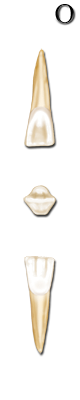
<style>
.page{position:relative;width:80px;height:400px;background:#ffffff}
.page>*{position:absolute;margin:0}
.t1{font:28.4px "TimesNewRomanPSMT";letter-spacing:0.005em;color:#000000}
</style>
<div class="page">
<p class="t1" style="left:55px;top:4px;width:19px;height:20px">O</p>
</div>
